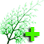
<style>
.page{position:relative;width:44px;height:44px;background:#ffffff}
.page>*{position:absolute;margin:0}
.t1{font:30px "Impact";letter-spacing:0.14em;color:#45f600}
</style>
<div class="page">
<p class="t1" style="left:25px;top:27px;width:15px;height:14px">+</p>
</div>
